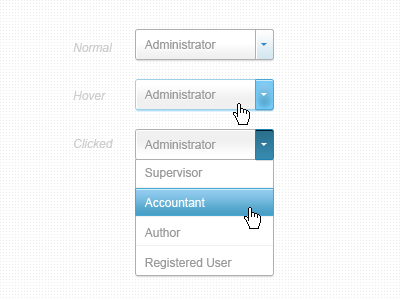
<style>
.page{position:relative;width:400px;height:300px;background:#ffffff}
.page>*{position:absolute;margin:0}
.t1{font:12px "ArialMT";color:#999999}
.t2{font:12px/48px "Arial-ItalicMT";color:#cccccc}
.t3{font:12px/30px "ArialMT";color:#999999}
.t4{font:12px/30px "ArialMT";color:#ffffff}
</style>
<div class="page">
<p class="t1" style="left:144px;top:40px;width:72px;height:9px">Administrator</p>
<p class="t2" style="left:73px;top:43px;width:40px;height:105px">Normal<br>Hover<br>Clicked</p>
<p class="t1" style="left:144px;top:90px;width:72px;height:9px">Administrator</p>
<p class="t1" style="left:144px;top:140px;width:72px;height:9px">Administrator</p>
<p class="t3" style="left:144px;top:168px;width:88px;height:101px">Supervisor<br><span class="t4">Accountant<br></span>Author<br>Registered User</p>
</div>
